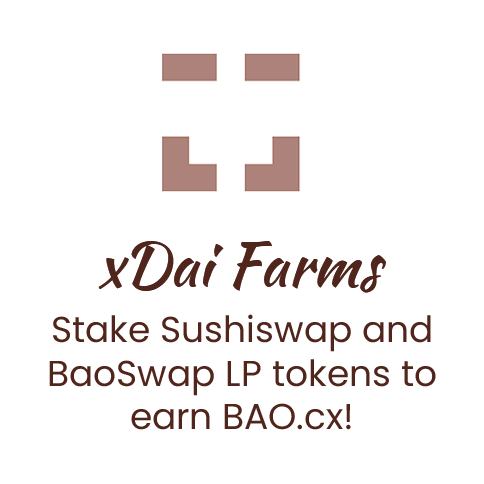
<style>
.page{position:relative;width:484px;height:484px;background:#ffffff}
.page>*{position:absolute;margin:0}
.t1{font:61.1px "KaushanScript-Regular";color:#50251c}
.t2{font:36px "Poppins-Regular";color:#50251c}
</style>
<div class="page">
<p class="t1" style="left:98px;top:241px;width:288px;height:52px">xDai Farms</p>
<p class="t2" style="left:49px;top:314px;width:387px;height:116px;text-align:center">Stake Sushiswap and BaoSwap LP tokens to earn BAO.cx!</p>
</div>
